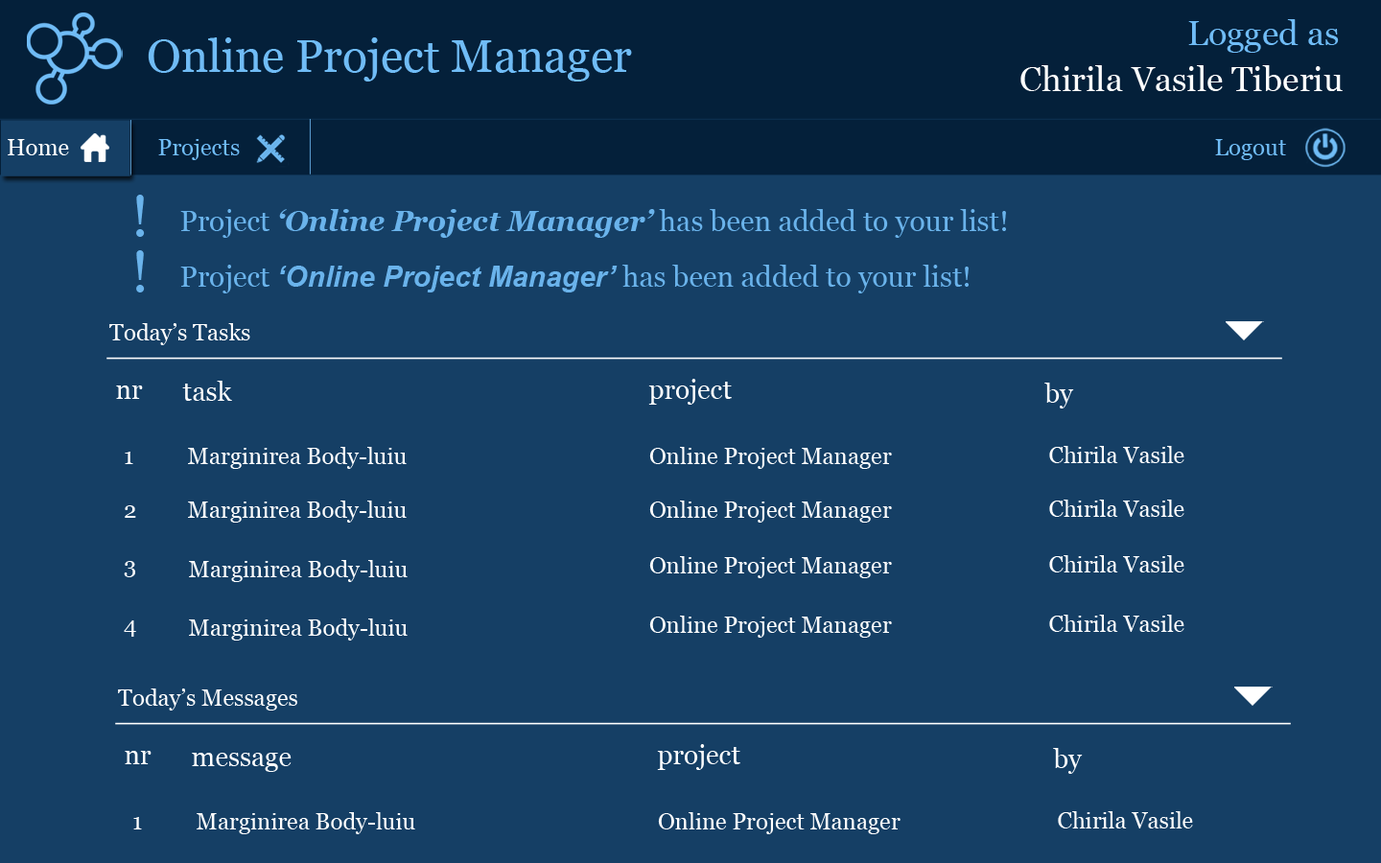
<style>
.page{position:relative;width:1381px;height:863px;background:#153f65}
.page>*{position:absolute;margin:0}
.t1{font:34.5px "Georgia";color:#70bcf6}
.t2{font:46px "Georgia";color:#70bcf6}
.t3{font:34.5px "Georgia";color:#fefefe}
.t4{font:23px "Georgia";color:#ffffff}
.t5{font:23px "Georgia";color:#70bcf6}
.t6{font:57.6px "Georgia";color:#6ab3eb}
.t7{font:28.8px "Georgia";color:#6ab3eb}
.t8{font:28.8px "Georgia-BoldItalic";color:#6ab3eb}
.t9{font:28.8px "Arial-BoldItalicMT";color:#6ab3eb}
.t10{font:26.9px "Georgia";color:#ffffff}
</style>
<div class="page">
<p class="t1" style="left:1188px;top:19px;width:151px;height:34px">Logged as</p>
<p class="t2" style="left:148px;top:37px;width:484px;height:45px">Online Project Manager</p>
<p class="t3" style="left:1021px;top:65px;width:322px;height:26px">Chirila Vasile Tiberiu</p>
<p class="t4" style="left:8px;top:139px;width:61px;height:16px">Home</p>
<p class="t5" style="left:158px;top:139px;width:82px;height:21px">Projects</p>
<p class="t5" style="left:1215px;top:139px;width:71px;height:21px">Logout</p>
<p class="t6" style="left:136px;top:195px;width:9px;height:42px">!</p>
<p class="t7" style="left:180px;top:209px;width:826px;height:29px">Project <span class="t8">‘Online Project Manager’</span> has been added to your list!</p>
<p class="t6" style="left:136px;top:250px;width:9px;height:43px">!</p>
<p class="t7" style="left:180px;top:265px;width:789px;height:29px">Project <span class="t9">‘Online Project Manager’</span> has been added to your list!</p>
<p class="t4" style="left:109px;top:323px;width:141px;height:22px">Today’s Tasks</p>
<p class="t10" style="left:116px;top:386px;width:27px;height:13px">nr</p>
<p class="t10" style="left:182px;top:381px;width:50px;height:20px">task</p>
<p class="t10" style="left:648px;top:379px;width:84px;height:26px">project</p>
<p class="t10" style="left:1045px;top:383px;width:29px;height:26px">by</p>
<p class="t4" style="left:188px;top:447px;width:219px;height:22px">Marginirea Body-luiu</p>
<p class="t4" style="left:649px;top:447px;width:243px;height:22px">Online Project Manager</p>
<p class="t4" style="left:1049px;top:446px;width:136px;height:17px">Chirila Vasile</p>
<p class="t4" style="left:125px;top:452px;width:8px;height:12px">1</p>
<p class="t4" style="left:125px;top:506px;width:11px;height:12px">2</p>
<p class="t4" style="left:188px;top:501px;width:219px;height:22px">Marginirea Body-luiu</p>
<p class="t4" style="left:649px;top:501px;width:243px;height:22px">Online Project Manager</p>
<p class="t4" style="left:1049px;top:500px;width:136px;height:17px">Chirila Vasile</p>
<p class="t4" style="left:649px;top:556px;width:243px;height:22px">Online Project Manager</p>
<p class="t4" style="left:1049px;top:555px;width:136px;height:18px">Chirila Vasile</p>
<p class="t4" style="left:124px;top:561px;width:11px;height:16px">3</p>
<p class="t4" style="left:189px;top:560px;width:219px;height:22px">Marginirea Body-luiu</p>
<p class="t4" style="left:649px;top:616px;width:243px;height:22px">Online Project Manager</p>
<p class="t4" style="left:1049px;top:615px;width:136px;height:17px">Chirila Vasile</p>
<p class="t4" style="left:124px;top:621px;width:12px;height:16px">4</p>
<p class="t4" style="left:189px;top:619px;width:219px;height:22px">Marginirea Body-luiu</p>
<p class="t4" style="left:118px;top:689px;width:179px;height:22px">Today’s Messages</p>
<p class="t10" style="left:657px;top:744px;width:84px;height:26px">project</p>
<p class="t10" style="left:1053px;top:748px;width:30px;height:26px">by</p>
<p class="t10" style="left:125px;top:751px;width:27px;height:13px">nr</p>
<p class="t10" style="left:192px;top:753px;width:100px;height:19px">message</p>
<p class="t4" style="left:133px;top:817px;width:9px;height:13px">1</p>
<p class="t4" style="left:197px;top:812px;width:218px;height:23px">Marginirea Body-luiu</p>
<p class="t4" style="left:658px;top:812px;width:243px;height:23px">Online Project Manager</p>
<p class="t4" style="left:1058px;top:811px;width:135px;height:18px">Chirila Vasile</p>
</div>
